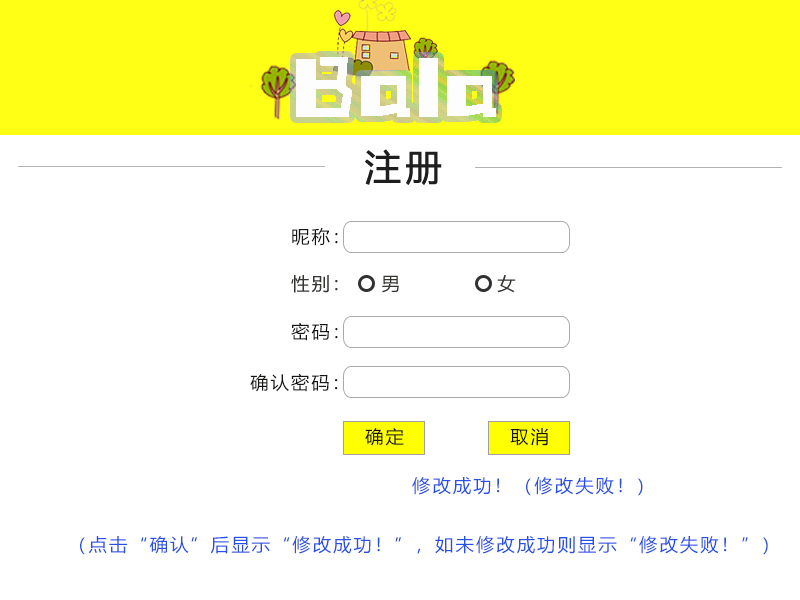
<style>
.page{position:relative;width:800px;height:600px;background:#ffffff}
.page>*{position:absolute;margin:0}
.t1{font:18px "MicrosoftYaHei";letter-spacing:0.1em;color:#151514;scale:1.03 1}
.t2{font:18px "MicrosoftYaHei";letter-spacing:0.1em;color:#2750e8;scale:1.03 1}
</style>
<div class="page">
<p class="t1" style="left:292px;top:227px;width:46px;height:19px">昵称：</p>
<p class="t1" style="left:291px;top:322px;width:47px;height:19px">密码：</p>
<p class="t1" style="left:250px;top:373px;width:88px;height:19px">确认密码：</p>
<p class="t2" style="left:412px;top:477px;width:231px;height:19px">修改成功！（修改失败！）</p>
<p class="t2" style="left:80px;top:536px;width:688px;height:19px">（点击“确认”后显示“修改成功！”，如未修改成功则显示“修改失败！”）</p>
</div>
